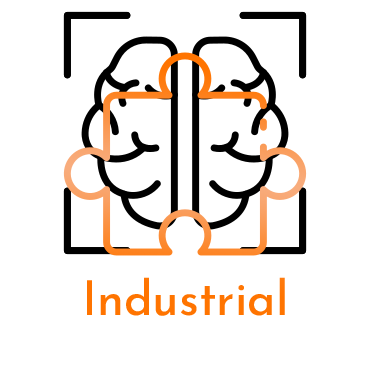
<style>
.page{position:relative;width:370px;height:370px;background:#ffffff}
.page>*{position:absolute;margin:0}
.t1{font:48px "JosefinSans-Medium";color:#ff7400}
</style>
<div class="page">
<p class="t1" style="left:87px;top:277px;width:198px;height:39px">Industrial</p>
</div>
